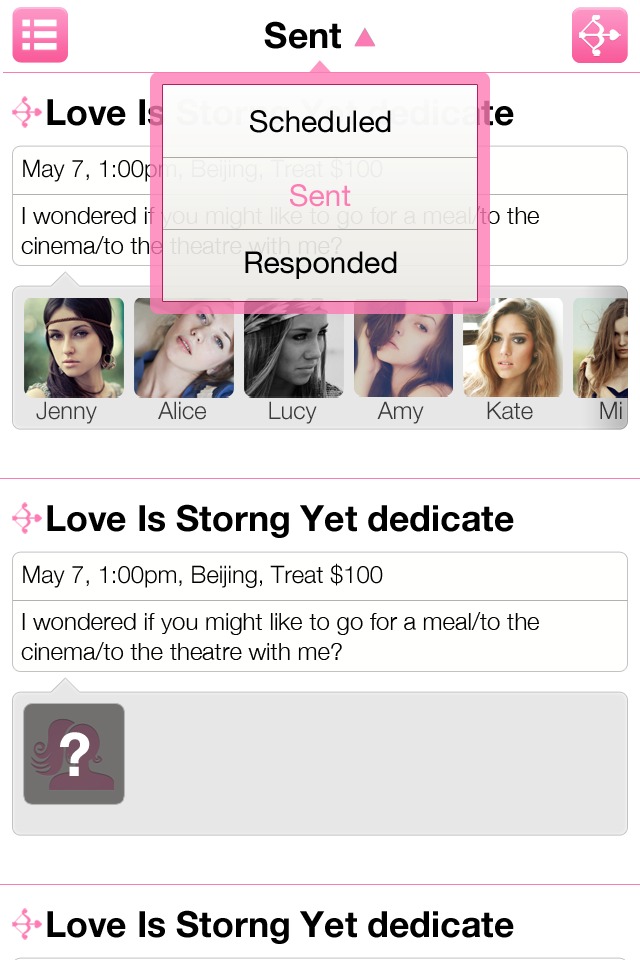
<style>
.page{position:relative;width:640px;height:960px;background:#ffffff}
.page>*{position:absolute;margin:0}
.t1{font:36px "HelveticaNeue-Bold";color:#000000}
.t2{font:36px "HelveticaNeue-Bold"}
.t3{font:30px "HelveticaNeue";color:#000000}
.t4{font:24px "HelveticaNeue-Light"}
.t5{font:30px "HelveticaNeue";color:#fc7cb3}
.t6{font:24px/6px "HelveticaNeue-Light"}
.t7{font:24px "HelveticaNeue-Light";color:#3a3a3a}
.t8{font:24px "HelveticaNeue-Light";color:#333333}
.t9{font:24px "HelveticaNeue-Light";color:#000000}
.t10{font:24px/6px "HelveticaNeue-Light";color:#000000}
.t11{font:60px "HelveticaNeue-Bold";color:#ffffff}
</style>
<div class="page">
<p class="t1" style="left:264px;top:21px;width:77px;height:28px">Sent</p>
<p class="t2" style="left:47px;top:98px;width:467px;height:34px">Love Is Storng Yet dedicate</p>
<p class="t3" style="left:250px;top:110px;width:141px;height:23px">Scheduled</p>
<p class="t4" style="left:23px;top:157px;width:360px;height:25px">May 7, 1:00pm, Beijing, Treat $100</p>
<p class="t5" style="left:290px;top:184px;width:61px;height:23px">Sent</p>
<p class="t6" style="left:21px;top:206px;width:518px;height:48px">I wondered if you might like to go for a meal/to the <br><br><br><br><br>cinema/to the theatre with me?</p>
<p class="t3" style="left:245px;top:251px;width:152px;height:28px">Responded</p>
<p class="t7" style="left:36px;top:401px;width:61px;height:23px">Jenny</p>
<p class="t7" style="left:158px;top:401px;width:48px;height:19px">Alice</p>
<p class="t7" style="left:269px;top:401px;width:48px;height:23px">Lucy</p>
<p class="t7" style="left:377px;top:401px;width:47px;height:23px">Amy</p>
<p class="t7" style="left:487px;top:401px;width:46px;height:19px">Kate</p>
<p class="t8" style="left:600px;top:401px;width:22px;height:18px">Mi</p>
<p class="t1" style="left:47px;top:504px;width:467px;height:34px">Love Is Storng Yet dedicate</p>
<p class="t9" style="left:23px;top:563px;width:360px;height:25px">May 7, 1:00pm, Beijing, Treat $100</p>
<p class="t10" style="left:21px;top:612px;width:518px;height:48px">I wondered if you might like to go for a meal/to the <br><br><br><br><br>cinema/to the theatre with me?</p>
<p class="t11" style="left:60px;top:732px;width:30px;height:44px">?</p>
<p class="t1" style="left:47px;top:910px;width:467px;height:34px">Love Is Storng Yet dedicate</p>
</div>
